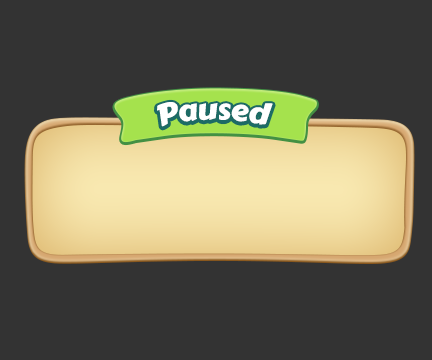
<style>
.page{position:relative;width:432px;height:360px;background:#333333}
.page>*{position:absolute;margin:0}
.t1{font:30px "CarterOne";letter-spacing:-0.02em;color:#ffffff}
</style>
<div class="page">
<p class="t1" style="left:157px;top:102px;width:116px;height:25px">Paused</p>
</div>
